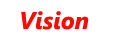
<style>
.page{position:relative;width:135px;height:44px;background:#ffffff}
.page>*{position:absolute;margin:0}
.t1{font:24px "SegoeUI-BoldItalic";color:#ff0800}
</style>
<div class="page">
<p class="t1" style="left:21px;top:11px;width:68px;height:19px">Vision</p>
</div>
